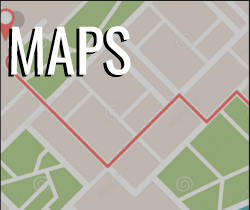
<style>
.page{position:relative;width:250px;height:210px;background:#beb6af}
.page>*{position:absolute;margin:0}
.t1{font:59px "Oswald-Regular";color:#fefffe;font-weight:bold}
</style>
<div class="page">
<p class="t1" style="left:11px;top:26px;width:120px;height:49px">MAPS</p>
</div>
